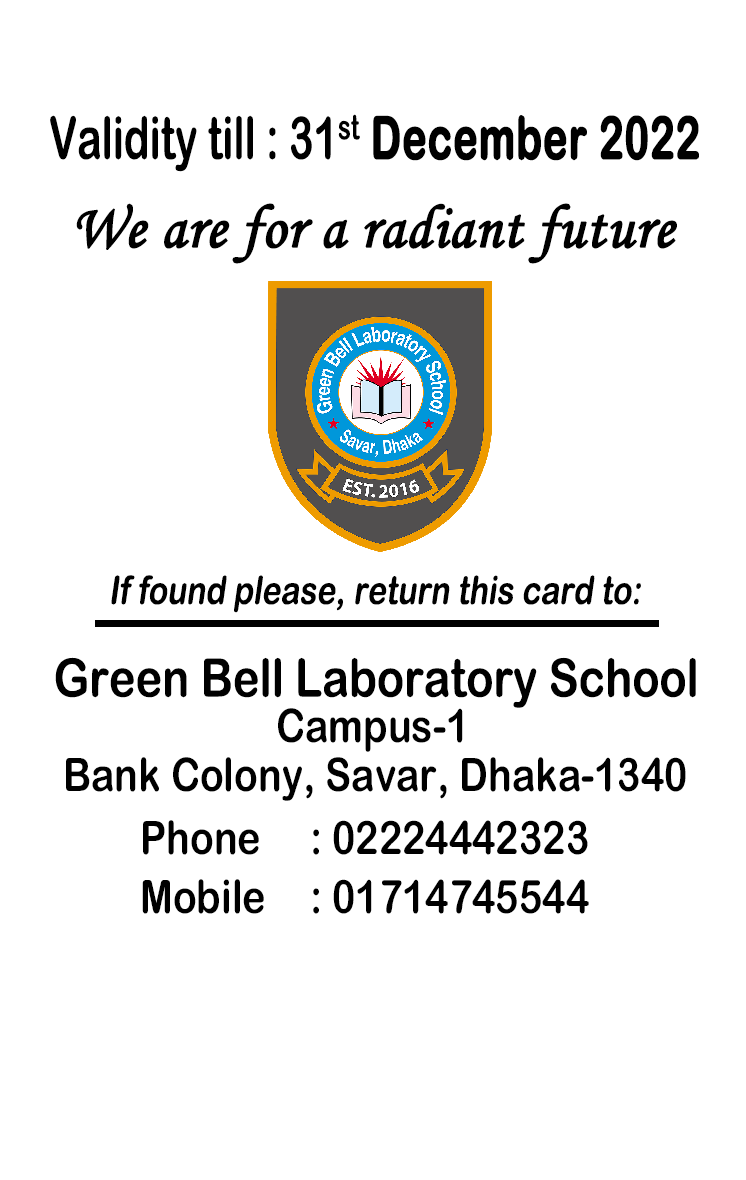
<style>
.page{position:relative;width:746px;height:1180px;background:#ffffff}
.page>*{position:absolute;margin:0}
.t1{font:58.8px "ArialRoundedMTBold";color:#000000;scale:0.7 1}
.t2{font:58.8px "ArialRoundedMTBold";color:#000000;font-weight:bold;scale:0.7 1}
.t3{font:44.2px "MonotypeCorsiva";color:#000000;font-weight:bold;scale:0.95 1}
.t4{font:39.2px "ArialRoundedMTBold";color:#000000;font-style:italic;scale:0.81 1}
.t5{font:52.9px "ArialRoundedMTBold";color:#000000;scale:0.85 1}
.t6{font:46.3px "ArialRoundedMTBold";color:#000000;scale:0.85 1}
</style>
<div class="page">
<p class="t1" style="left:50px;top:114px;width:649px;height:58px">Validity till : 31st<span class="t2"> December 2022</span></p>
<p class="t3" style="left:76px;top:203px;width:601px;height:61px">We are for a radiant future</p>
<p class="t4" style="left:111px;top:575px;width:530px;height:38px">If found please, return this card to:</p>
<p class="t5" style="left:55px;top:657px;width:641px;height:51px">Green Bell Laboratory School</p>
<p class="t6" style="left:278px;top:708px;width:185px;height:44px">Campus-1</p>
<p class="t6" style="left:66px;top:757px;width:620px;height:44px">Bank Colony, Savar, Dhaka-1340</p>
<p class="t6" style="left:143px;top:820px;width:445px;height:35px">Phone : 02224442323</p>
<p class="t6" style="left:142px;top:879px;width:447px;height:35px">Mobile : 01714745544</p>
</div>
